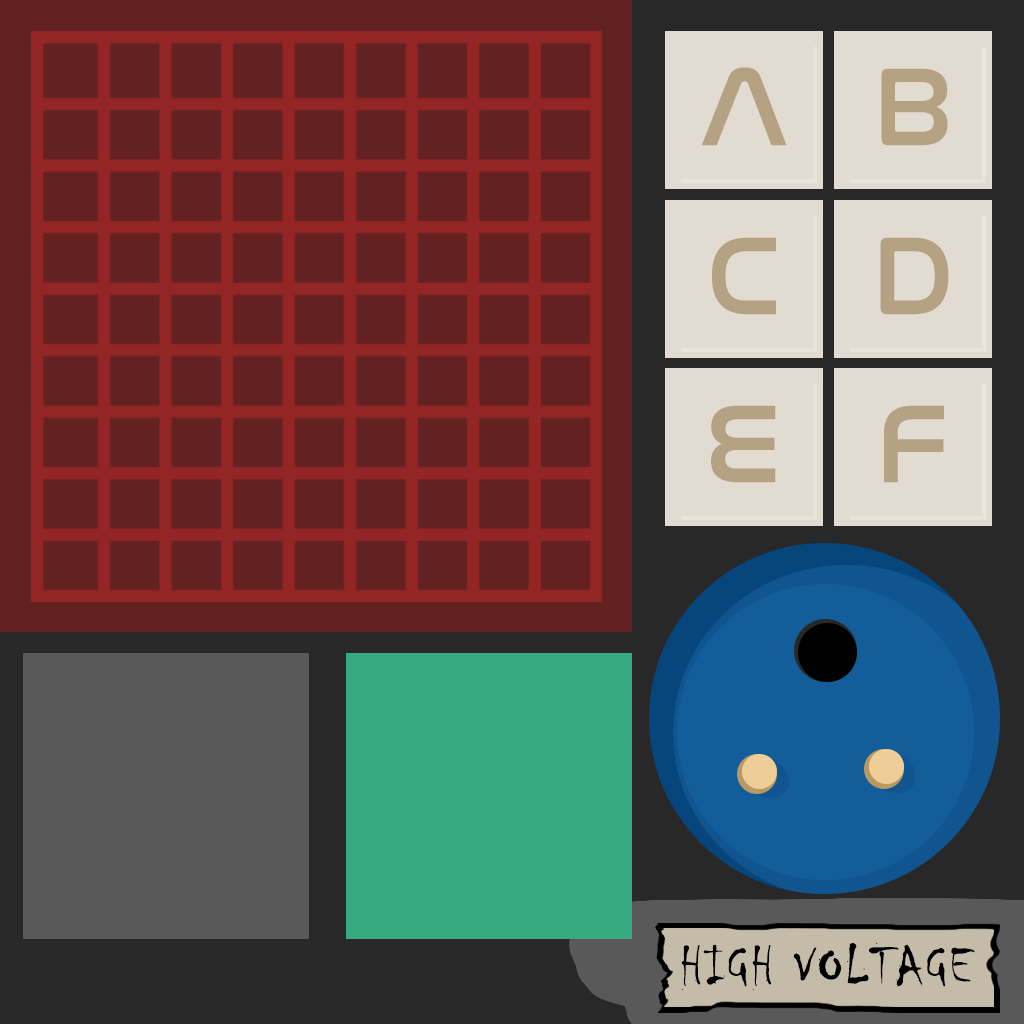
<style>
.page{position:relative;width:1024px;height:1024px;background:#642121}
.page>*{position:absolute;margin:0}
.t1{font:112.9px "NasalizationRg-Regular";letter-spacing:0.04em;color:#b5a282}
.t2{font:56.1px "Chiller-Regular";letter-spacing:0.04em;color:#000000}
</style>
<div class="page">
<p class="t1" style="left:701px;top:67px;width:86px;height:79px">A</p>
<p class="t1" style="left:881px;top:68px;width:67px;height:78px">B</p>
<p class="t1" style="left:712px;top:237px;width:64px;height:78px">C</p>
<p class="t1" style="left:880px;top:237px;width:69px;height:78px">D</p>
<p class="t1" style="left:711px;top:405px;width:65px;height:78px">E</p>
<p class="t1" style="left:884px;top:405px;width:60px;height:78px">F</p>
<p class="t2" style="left:681px;top:942px;width:294px;height:49px">HIGH VOLTAGE</p>
</div>
